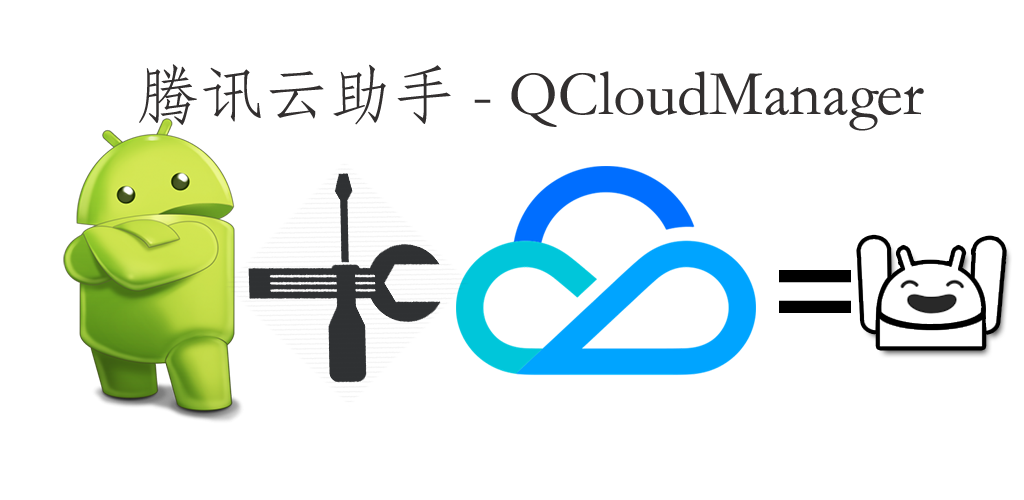
<style>
.page{position:relative;width:1024px;height:500px;background:#ffffff}
.page>*{position:absolute;margin:0}
.t1{font:64px "STFangsong";color:#322f2f}
.t2{font:133.3px "OldEnglishTextMT";color:#000000}
</style>
<div class="page">
<p class="t1" style="left:139px;top:64px;width:785px;height:67px">腾讯云助手 - QCloudManager</p>
<p class="t2" style="left:779px;top:270px;width:72px;height:43px">=</p>
</div>
